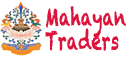
<style>
.page{position:relative;width:128px;height:60px;background:#ffffff}
.page>*{position:absolute;margin:0}
.t1{font:24px/24px "Chalkduster";color:#dc143c;font-weight:bold;scale:0.67 1}
</style>
<div class="page">
<p class="t1" style="left:45px;top:6px;width:81px;height:45px">Mahayan<br>Traders</p>
</div>
